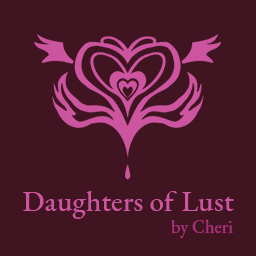
<style>
.page{position:relative;width:256px;height:256px;background:#401421}
.page>*{position:absolute;margin:0}
.t1{font:29.4px "EBGaramond-Medium";color:#cd559f}
.t2{font:18px "EBGaramond-Medium";color:#ab307c}
</style>
<div class="page">
<p class="t1" style="left:23px;top:190px;width:211px;height:29px">Daughters of Lust</p>
<p class="t2" style="left:171px;top:219px;width:62px;height:19px">by Cheri</p>
</div>
